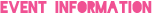
<style>
.page{position:relative;width:153px;height:14px;background:#ffffff}
.page>*{position:absolute;margin:0}
.t1{font:16px "Blackout-Midnight";color:#f05193}
</style>
<div class="page">
<p class="t1" style="left:0px;top:1px;width:152px;height:12px">Event Information</p>
</div>
